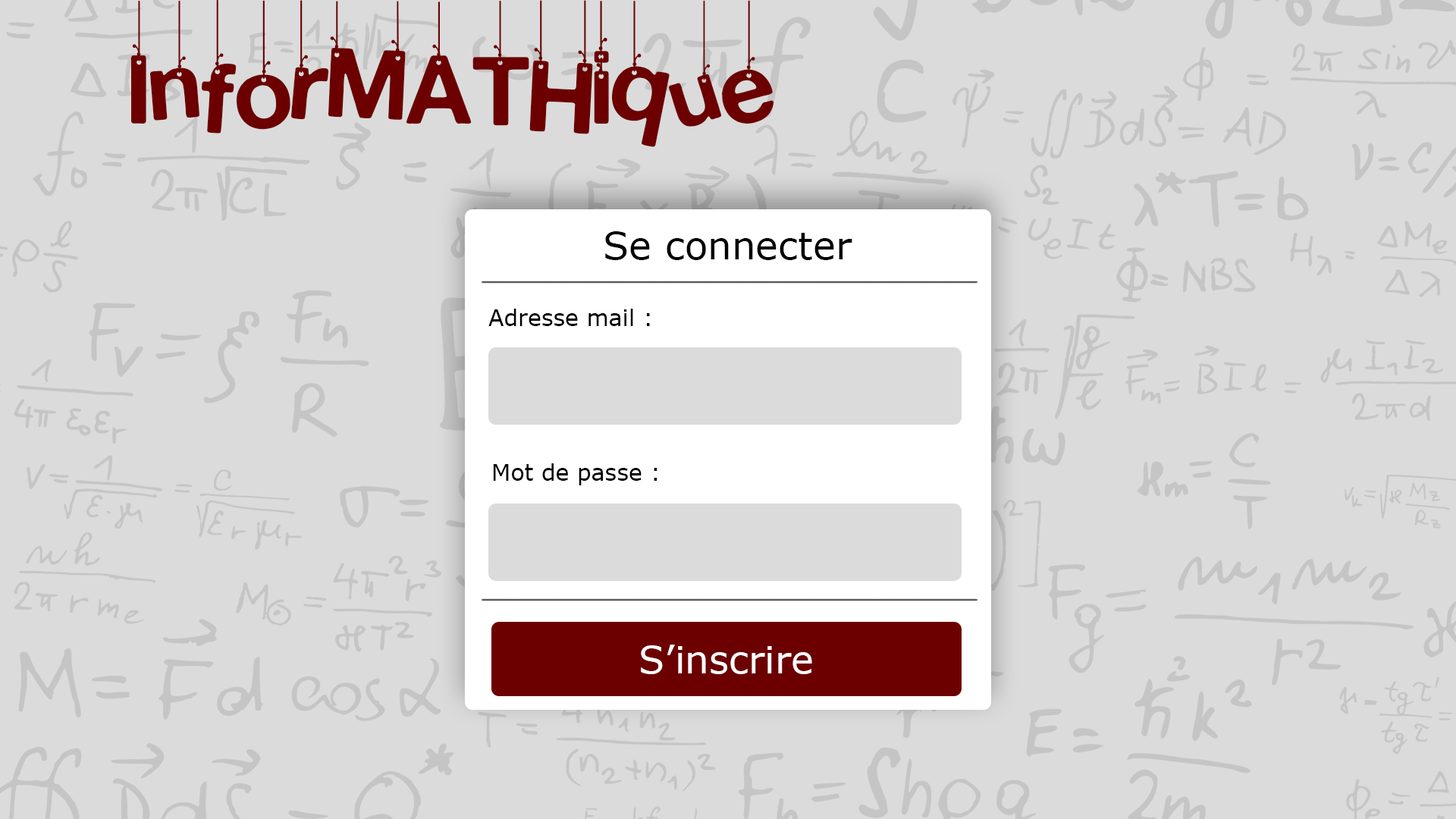
<style>
.page{position:relative;width:1456px;height:819px;background:#dbdbdb}
.page>*{position:absolute;margin:0}
.t1{font:113.7px "HangingLetters";color:#6c0000}
.t2{font:37.9px "Verdana";color:#000000}
.t3{font:22.7px "Verdana";color:#000000}
.t4{font:37.9px "Verdana";color:#ffffff}
</style>
<div class="page">
<p class="t1" style="left:130px;top:0px;width:643px;height:147px">InforMATHique</p>
<p class="t2" style="left:605px;top:231px;width:247px;height:29px">Se connecter</p>
<p class="t3" style="left:488px;top:309px;width:162px;height:17px">Adresse mail :</p>
<p class="t3" style="left:493px;top:463px;width:164px;height:22px">Mot de passe :</p>
<p class="t4" style="left:641px;top:645px;width:171px;height:29px">S’inscrire</p>
</div>
